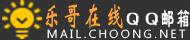
<style>
.page{position:relative;width:190px;height:40px;background:#333333}
.page>*{position:absolute;margin:0}
.t1{font:28.1px "STXinwei";letter-spacing:0.2em;color:#ffa134;text-transform:uppercase;scale:0.62 1}
.t2{font:17.9px "¿¬Ìå";letter-spacing:0.2em;color:#ffffff;text-transform:uppercase;scale:1.56 1}
.t3{font:28.1px "LiSu";letter-spacing:0.2em;color:#ffffff;text-transform:uppercase;scale:0.48 1}
.t4{font:11.5px "MicrosoftNewTaiLue";letter-spacing:0.2em;color:#ffffff;text-transform:uppercase;scale:1.04 1}
</style>
<div class="page">
<p class="t1" style="left:45px;top:3px;width:78px;height:26px">乐哥在线</p>
<p class="t2" style="left:126px;top:12px;width:32px;height:14px">QQ</p>
<p class="t3" style="left:161px;top:9px;width:29px;height:19px">邮箱</p>
<p class="t4" style="left:47px;top:29px;width:139px;height:10px">mail.choong.net</p>
</div>
